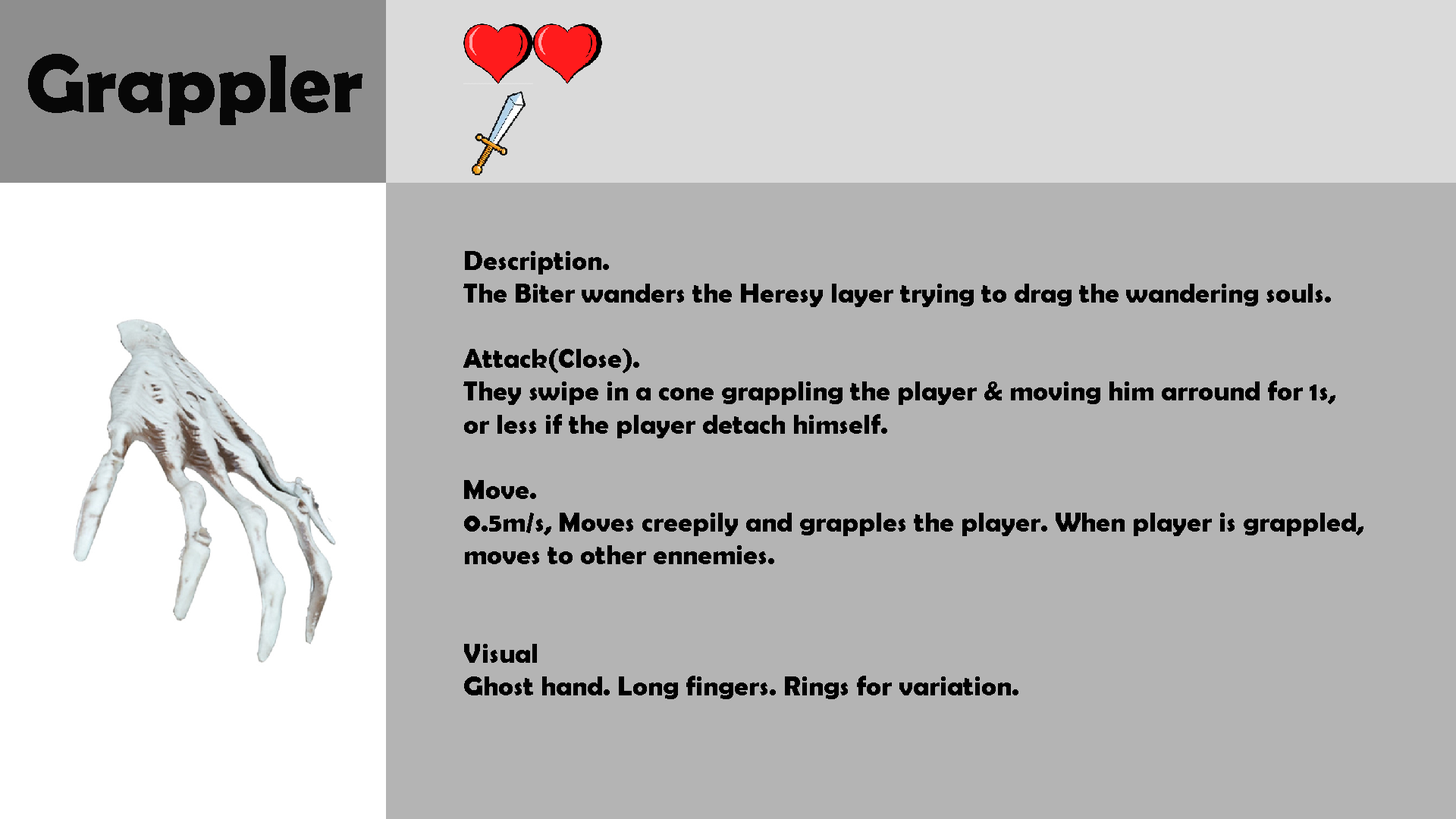
<style>
.page{position:relative;width:1456px;height:819px;background:#b4b4b4}
.page>*{position:absolute;margin:0}
.t1{font:83.4px "BerlinSansFBDemi-Bold";color:#070707}
.t2{font:27.3px "BerlinSansFBDemi-Bold";color:#000000}
</style>
<div class="page">
<p class="t1" style="left:28px;top:54px;width:334px;height:71px">Grappler</p>
<p class="t2" style="left:463px;top:251px;width:900px;height:448px">Description.<br>The Biter wanders the Heresy layer trying to drag the wandering souls.<br><br>Attack(Close).<br>They swipe in a cone grappling the player &amp; moving him arround for 1s,<br>or less if the player detach himself.<br><br>Move.<br>0.5m/s, Moves creepily and grapples the player. When player is grappled,<br>moves to other ennemies.<br><br><br>Visual<br>Ghost hand. Long fingers. Rings for variation.</p>
</div>
